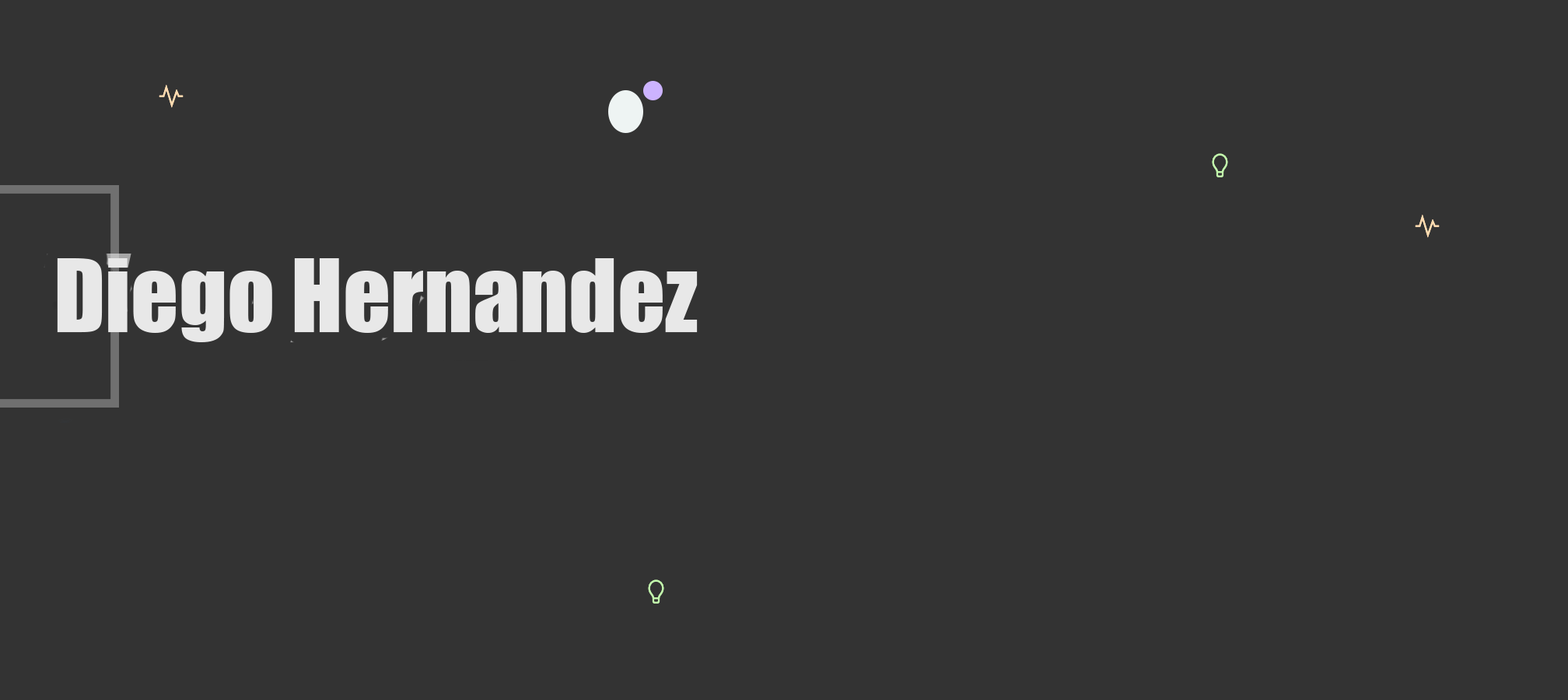
<style>
.page{position:relative;width:1568px;height:700px;background:#333333}
.page>*{position:absolute;margin:0}
.t1{font:93.3px "Impact";color:#e8e8e8}
</style>
<div class="page">
<p class="t1" style="left:57px;top:258px;width:641px;height:84px">Diego Hernandez</p>
</div>
